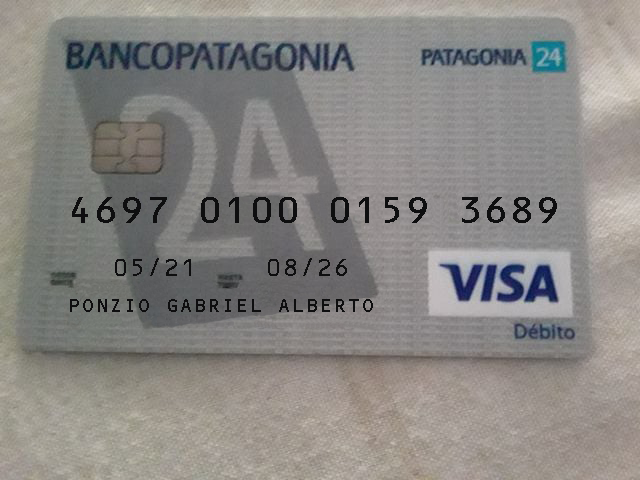
<style>
.page{position:relative;width:640px;height:480px}
.page>*{position:absolute;margin:0}
.t1{font:36px "OCRBMedium";color:#0e0e0f}
.t2{font:24px "OCRBMedium";color:#0e0e0f}
.t3{font:19.8px "OCRBMedium";color:#0e0e0f}
</style>
<div class="page">
<p class="t1" style="left:72px;top:197px;width:485px;height:26px">4697 0100 0159 3689</p>
<p class="t2" style="left:115px;top:258px;width:232px;height:18px">05/21    08/26</p>
<p class="t3" style="left:70px;top:299px;width:303px;height:13px">PONZIO GABRIEL ALBERTO</p>
</div>
